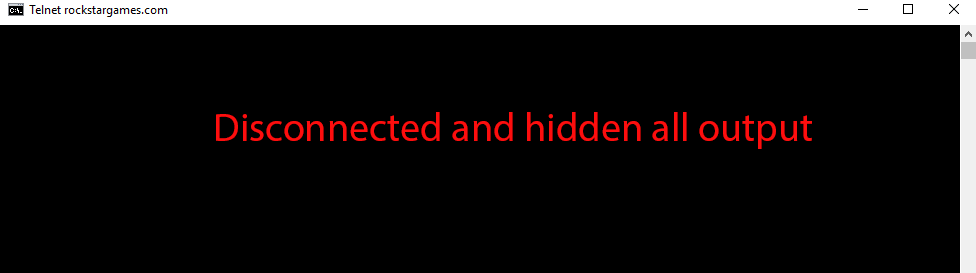
<style>
.page{position:relative;width:976px;height:273px;background:#000000}
.page>*{position:absolute;margin:0}
.t1{font:40px "MyriadPro-Regular";color:#fd0e0e}
</style>
<div class="page">
<p class="t1" style="left:216px;top:112px;width:596px;height:37px">Disconnected and hidden all output</p>
</div>
